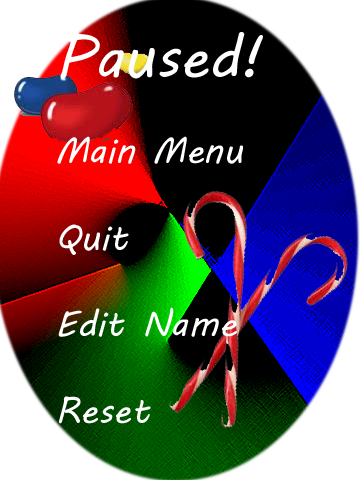
<style>
.page{position:relative;width:360px;height:480px;background:#000000}
.page>*{position:absolute;margin:0}
.t1{font:36px "MVBoli";color:#ffffff}
.t2{font:58.7px "MVBoli";color:#ffffff}
</style>
<div class="page">
<p class="t1" style="left:57px;top:30px;width:206px;height:394px"><span class="t2">Paused!<br></span><br>Main Menu<br><br>Quit<br><br>Edit Name<br><br>Reset</p>
</div>
